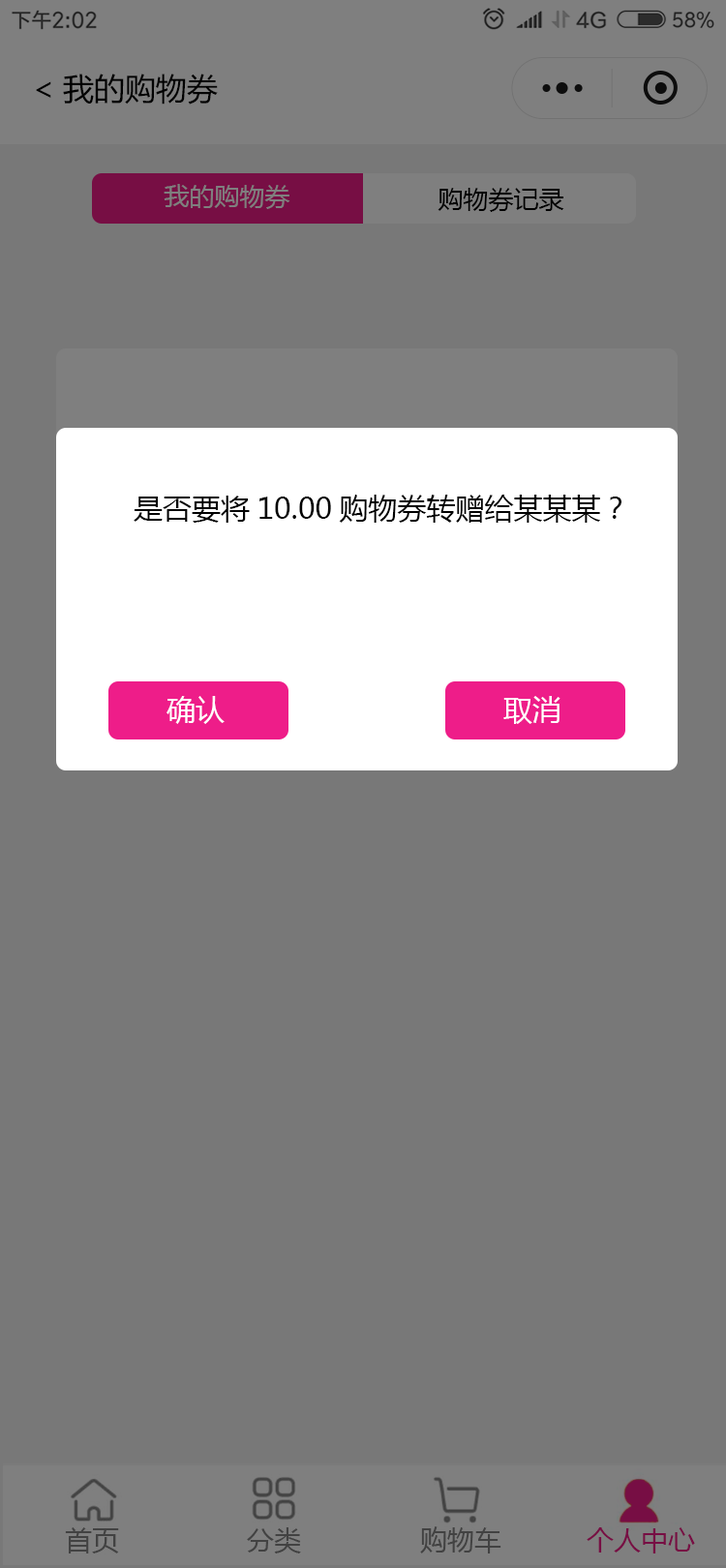
<style>
.page{position:relative;width:726px;height:1568px;background:#787878}
.page>*{position:absolute;margin:0}
.t1{font:31px "MicrosoftYaHei";color:#000000}
.t2{font:25.2px "MicrosoftYaHei";color:#7f7f7f}
.t3{font:25.2px "MicrosoftYaHei";color:#000000}
.t4{font:29px "MicrosoftYaHei";color:#000000}
.t5{font:29px "MicrosoftYaHei";color:#ffffff}
</style>
<div class="page">
<p class="t1" style="left:36px;top:74px;width:182px;height:31px">&lt;我的购物券</p>
<p class="t2" style="left:164px;top:184px;width:126px;height:25px">我的购物券</p>
<p class="t3" style="left:437px;top:188px;width:127px;height:24px">购物券记录</p>
<p class="t4" style="left:134px;top:495px;width:487px;height:28px">是否要将10.00购物券转赠给某某某？</p>
<p class="t5" style="left:166px;top:696px;width:59px;height:28px">确认</p>
<p class="t5" style="left:166px;top:696px;width:59px;height:28px">确认</p>
<p class="t5" style="left:503px;top:696px;width:57px;height:28px">取消</p>
</div>
